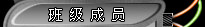
<style>
.page{position:relative;width:205px;height:27px}
.page>*{position:absolute;margin:0}
.t1{font:14px "SimSun";color:#ffffff}
</style>
<div class="page">
<p class="t1" style="left:49px;top:8px;width:75px;height:13px">班 级 成 员</p>
</div>
